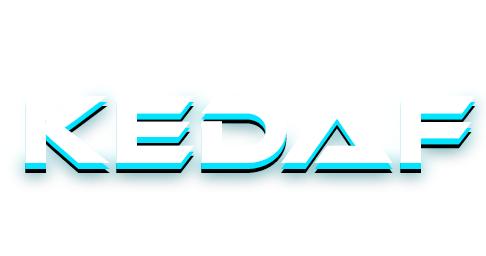
<style>
.page{position:relative;width:486px;height:256px;background:#ffffff}
.page>*{position:absolute;margin:0}
.t1{font:100px "EthnocentricRg-Regular";color:#ffffff}
.t2{font:100px "EthnocentricRg-Regular"}
</style>
<div class="page">
<p class="t1" style="left:25px;top:95px;width:451px;height:68px">KEDAF</p>
<p class="t2" style="left:25px;top:105px;width:451px;height:68px">KEDAF</p>
</div>
